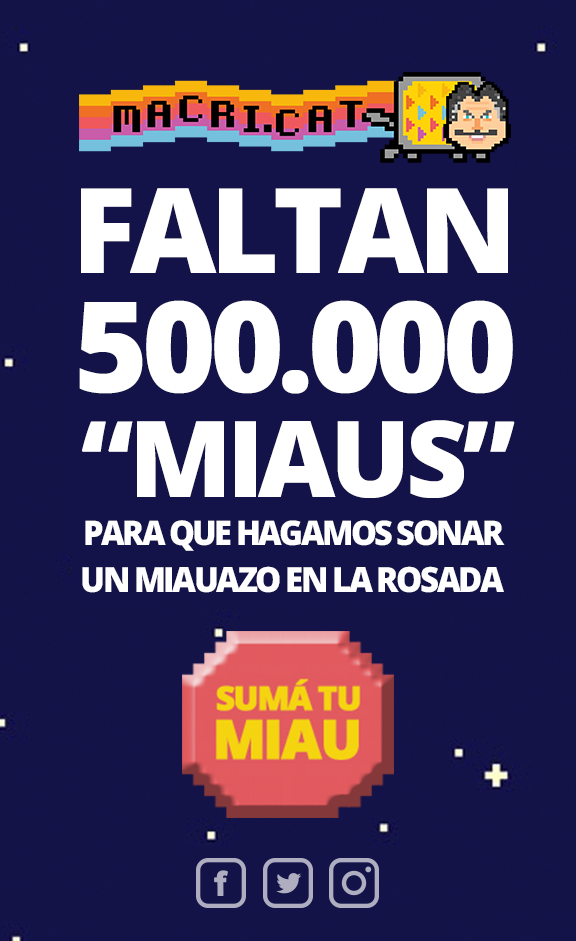
<style>
.page{position:relative;width:576px;height:941px;background:#141349}
.page>*{position:absolute;margin:0}
.t1{font:118.3px "OpenSans-Extrabold";letter-spacing:-0.05em;color:#ffffff}
.t2{font:126.1px "OpenSans-Extrabold";letter-spacing:-0.05em;color:#ffffff}
.t3{font:106.1px "OpenSans-Extrabold";letter-spacing:-0.05em;color:#ffffff}
.t4{font:33.9px "OpenSans-Extrabold";letter-spacing:-0.075em;color:#ffffff;scale:0.96 1}
.t5{font:34.8px "OpenSans-Extrabold";letter-spacing:-0.075em;color:#ffffff;scale:0.95 1}
</style>
<div class="page">
<p class="t1" style="left:81px;top:188px;width:427px;height:85px">FALTAN</p>
<p class="t2" style="left:79px;top:300px;width:434px;height:94px">500.000</p>
<p class="t3" style="left:82px;top:420px;width:433px;height:78px">“MIAUS”</p>
<p class="t4" style="left:85px;top:520px;width:420px;height:31px">PARA QUE HAGAMOS SONAR</p>
<p class="t5" style="left:82px;top:566px;width:422px;height:27px">UN MIAUAZO EN LA ROSADA</p>
</div>
